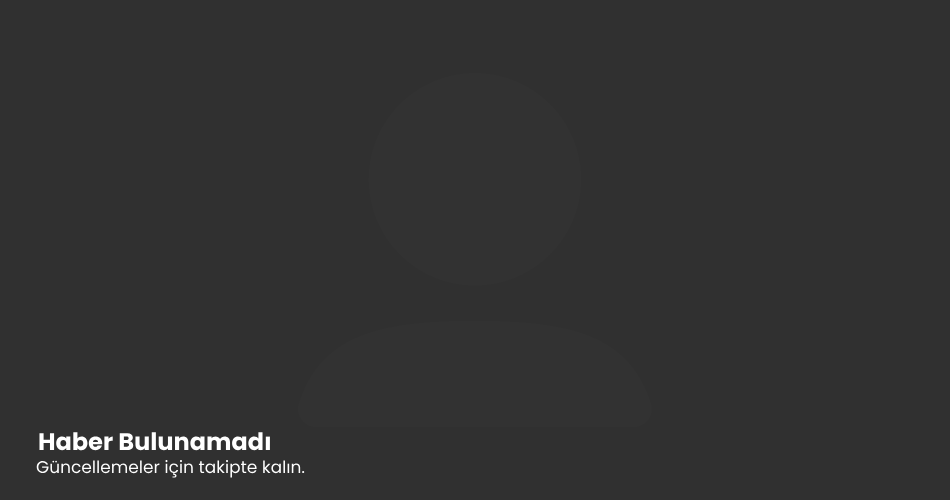
<style>
.page{position:relative;width:950px;height:500px;background:#303030}
.page>*{position:absolute;margin:0}
.t1{font:24px "Poppins-Bold";color:#ffffff}
.t2{font:17px "Poppins-Regular";color:#ffffff}
</style>
<div class="page">
<p class="t1" style="left:39px;top:432px;width:231px;height:19px">Haber Bulunamadı</p>
<p class="t2" style="left:36px;top:460px;width:269px;height:18px">Güncellemeler için takipte kalın.</p>
</div>
